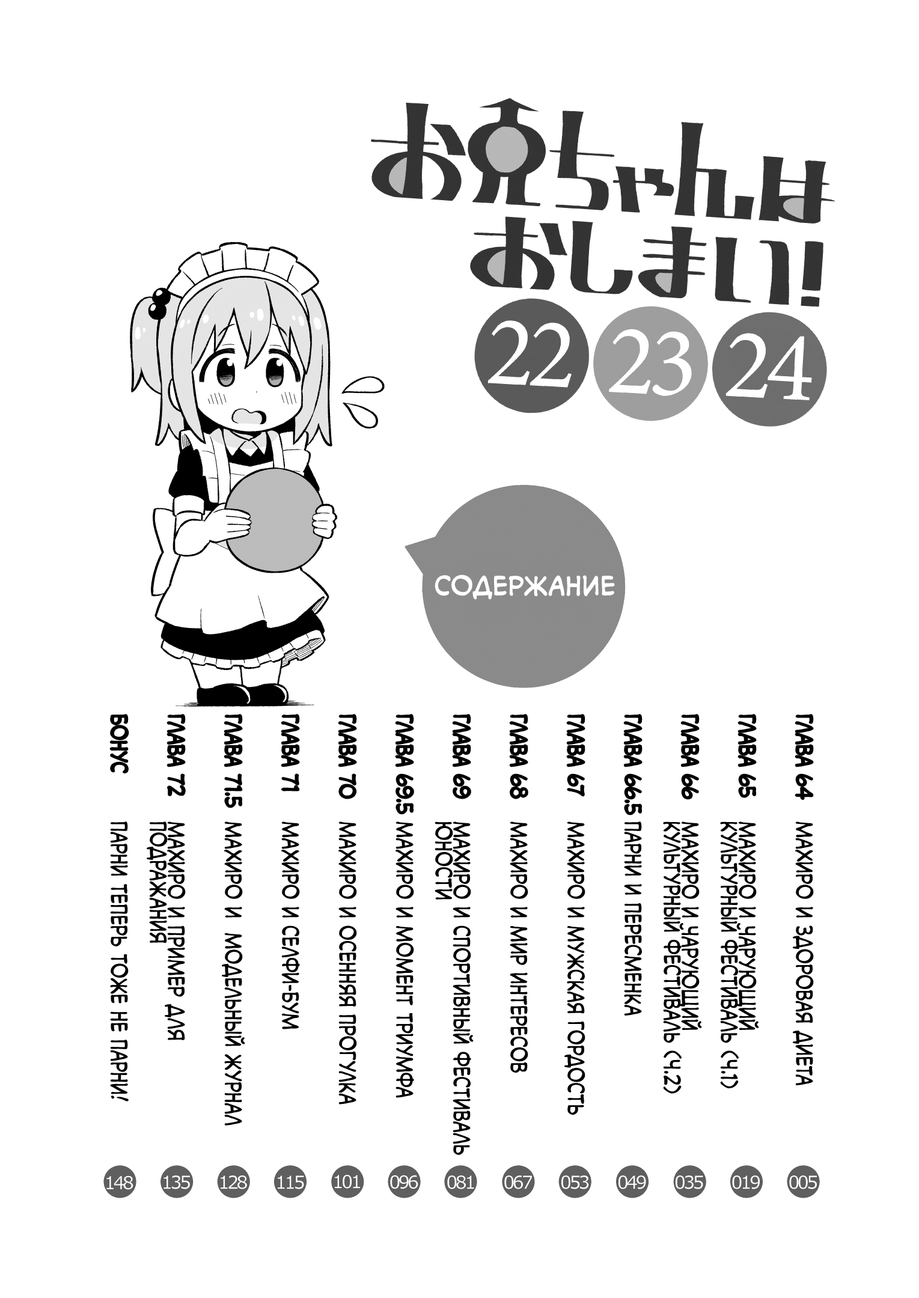
<style>
.page{position:relative;width:919px;height:1298px;background:#ffffff}
.page>*{position:absolute;margin:0}
.t1{font:25.2px "v_CCMonologous";color:#ffffff;text-transform:uppercase;font-weight:bold}
.t2{font:21.6px/57.1px "v_CCMonologous";color:#000000;text-transform:uppercase;scale:0.8 1}
.t3{font:21.6px/18px "v_CCMonologous";color:#000000;text-transform:uppercase;scale:0.8 1}
.t4{font:21.6px/39.1px "v_CCMonologous";color:#000000;text-transform:uppercase;scale:0.8 1}
</style>
<div class="page">
<p class="t1" style="left:434px;top:574px;width:181px;height:26px">Содержание</p>
<p class="t2" style="left:110px;top:714px;width:703px;height:101px;rotate:90deg">глава 64<br>Глава 65<br>Глава 66<br>Глава 66.5<br>Глава 67<br>Глава 68<br>Глава 69<br>Глава 69.5<br>Глава 70<br>Глава 71<br>Глава 71.5<br>Глава 72<br>Бонус</p>
<p class="t2" style="left:110px;top:821px;width:704px;height:334px;rotate:90deg">Махиро и здоровая диета<br>Махиро и чарующий<br><span class="t3">культурный фестиваль (ч.1)<br></span><span class="t4">Махиро и чарующий<br></span><span class="t3">культурный фестиваль (ч.2)<br></span><span class="t4">Парни и пересменка<br></span>Махиро и мужская гордость<br>Махиро и мир интересов<br>Махиро и спортивный фестиваль<br><span class="t3">юности<br></span><span class="t4">Махиро и момент триумфа<br></span>Махиро и осенняя прогулка<br>Махиро и селфи-бум<br>Махиро и  модельный журнал<br>Махиро и пример для<br><span class="t3">подражания<br></span><span class="t4">Парни теперь тоже не парни!</span></p>
</div>
